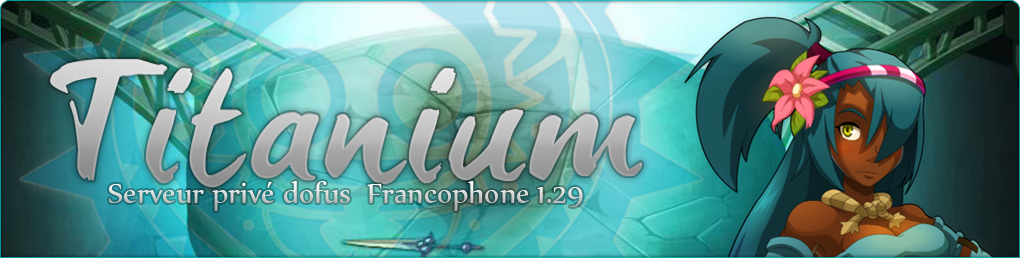
<style>
.page{position:relative;width:1020px;height:258px}
.page>*{position:absolute;margin:0}
.t1{font:157.6px "brush-tipTerrence"}
.t2{font:34.1px "Nyala-Regular";color:#d3d3d3}
</style>
<div class="page">
<p class="t1" style="left:50px;top:59px;width:592px;height:128px">Titanium</p>
<p class="t2" style="left:109px;top:181px;width:474px;height:30px">Serveur privé dofus  Francophone 1.29</p>
</div>
